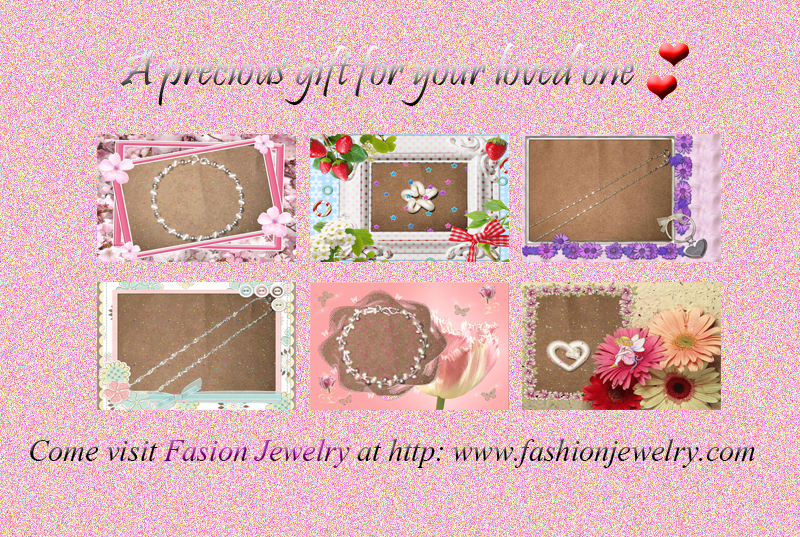
<style>
.page{position:relative;width:800px;height:537px}
.page>*{position:absolute;margin:0}
.t1{font:12px "Pristina-Regular"}
.t2{font:37.5px "Vijaya"}
</style>
<div class="page">
<p class="t1" style="left:121px;top:43px;width:513px;height:63px;text-align:right">A precious gift for your loved one</p>
<p class="t2" style="left:30px;top:439px;width:725px;height:29px">Come visit Fasion Jewelry at http: www.fashionjewelry.com</p>
</div>
